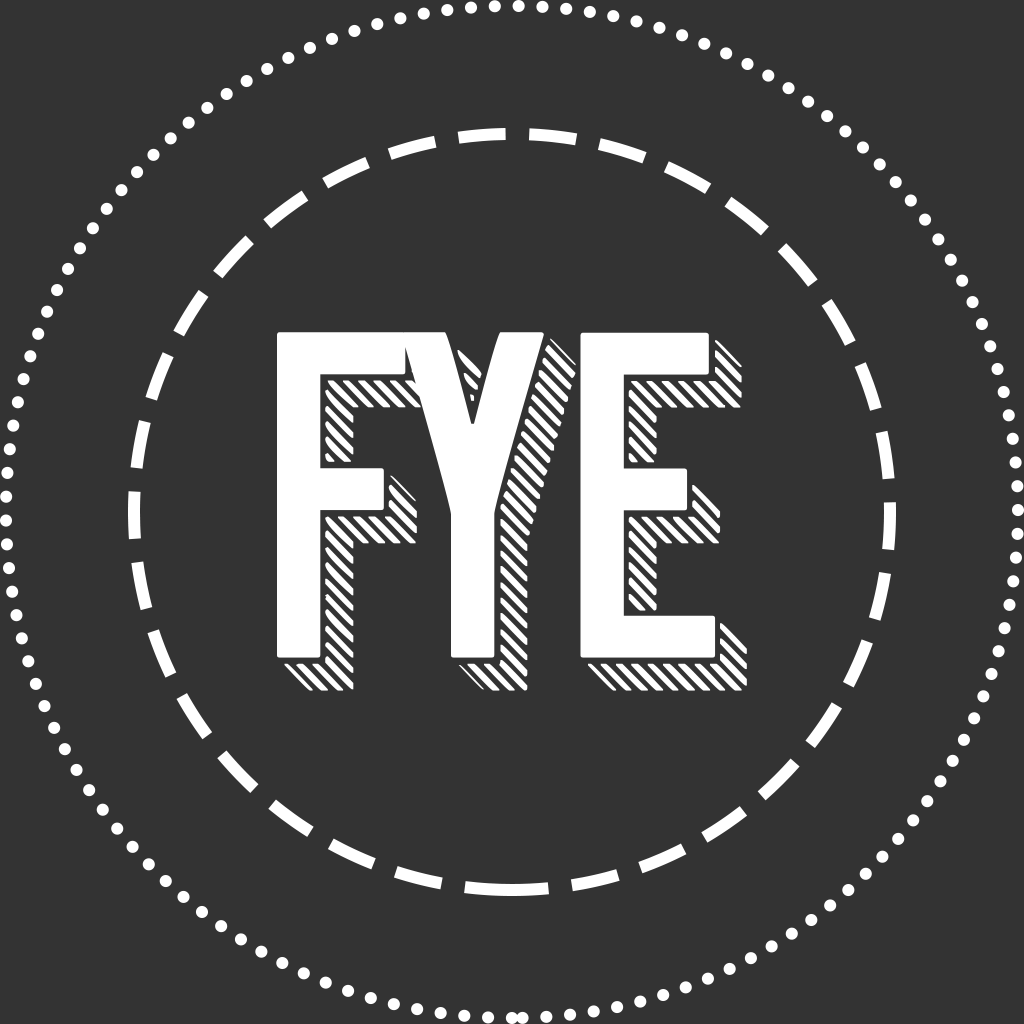
<style>
.page{position:relative;width:1024px;height:1024px;background:#333333}
.page>*{position:absolute;margin:0}
.t1{font:512px "SunsetBoulevard";color:#ffffff}
</style>
<div class="page">
<p class="t1" style="left:277px;top:332px;width:470px;height:359px">FYE</p>
</div>
